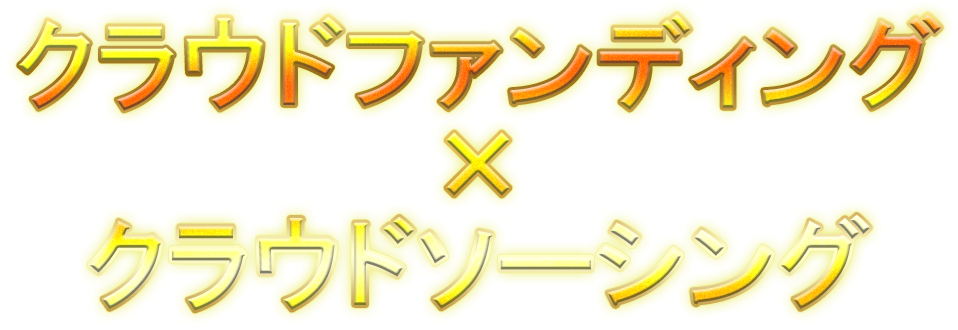
<style>
.page{position:relative;width:958px;height:330px;background:#ffffff}
.page>*{position:absolute;margin:0}
.t1{font:100px/100px "HGPGothicE"}
</style>
<div class="page">
<p class="t1" style="left:19px;top:14px;width:922px;height:297px;text-align:center">クラウドファンディング<br>×<br>クラウドソーシング</p>
</div>
